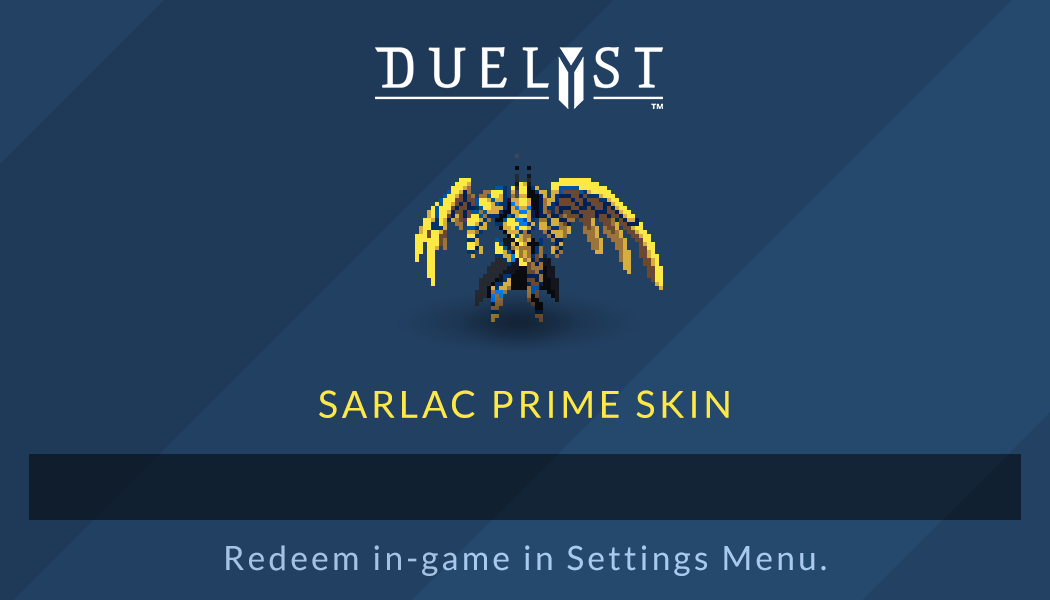
<style>
.page{position:relative;width:1050px;height:600px;background:#224062}
.page>*{position:absolute;margin:0}
.t1{font:37.5px "Lato-Regular";letter-spacing:0.1em;color:#fce945}
.t2{font:33.3px "Lato-Regular";letter-spacing:0.1em;color:#a7caef}
</style>
<div class="page">
<p class="t1" style="left:319px;top:390px;width:410px;height:28px">SARLAC PRIME SKIN</p>
<p class="t2" style="left:226px;top:545px;width:600px;height:31px">Redeem in-game in Settings Menu.</p>
</div>
